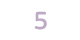
<style>
.page{position:relative;width:80px;height:40px;background:#ffffff}
.page>*{position:absolute;margin:0}
.t1{font:25px "CoHeadlineCorp-Regular";letter-spacing:-0.025em;color:#bda9c4;scale:0.95 1}
</style>
<div class="page">
<p class="t1" style="left:34px;top:11px;width:13px;height:19px">5</p>
</div>
